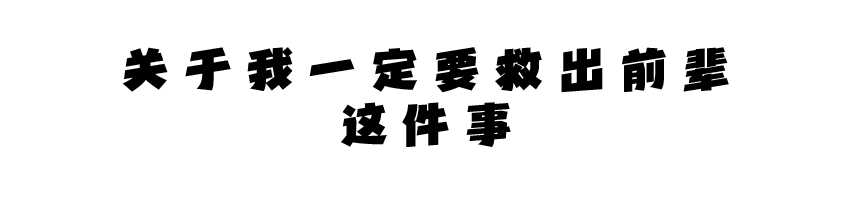
<style>
.page{position:relative;width:851px;height:201px;background:#ffffff}
.page>*{position:absolute;margin:0}
.t1{font:45.8px "HGGHT";letter-spacing:0.36em;color:#000000}
</style>
<div class="page">
<p class="t1" style="left:122px;top:47px;width:607px;height:100px;text-align:center">关于我一定要救出前辈<br>这件事</p>
</div>
